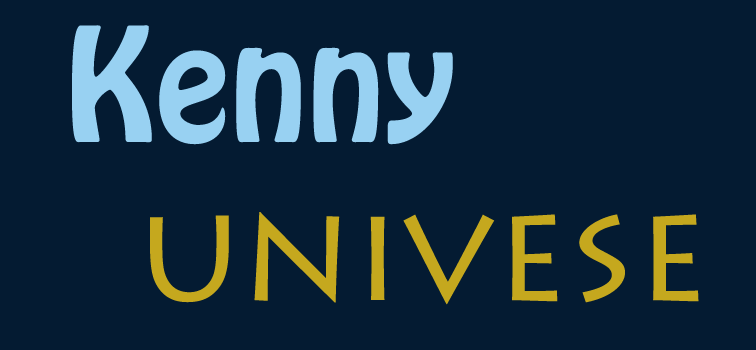
<style>
.page{position:relative;width:756px;height:350px;background:#041b32}
.page>*{position:absolute;margin:0}
.t1{font:140px "HoboStd";color:#98d1f2}
.t2{font:140px "LithosPro-Regular";color:#c5a81e}
</style>
<div class="page">
<p class="t1" style="left:72px;top:25px;width:381px;height:120px">Kenny</p>
<p class="t2" style="left:150px;top:212px;width:549px;height:93px">univese</p>
</div>
